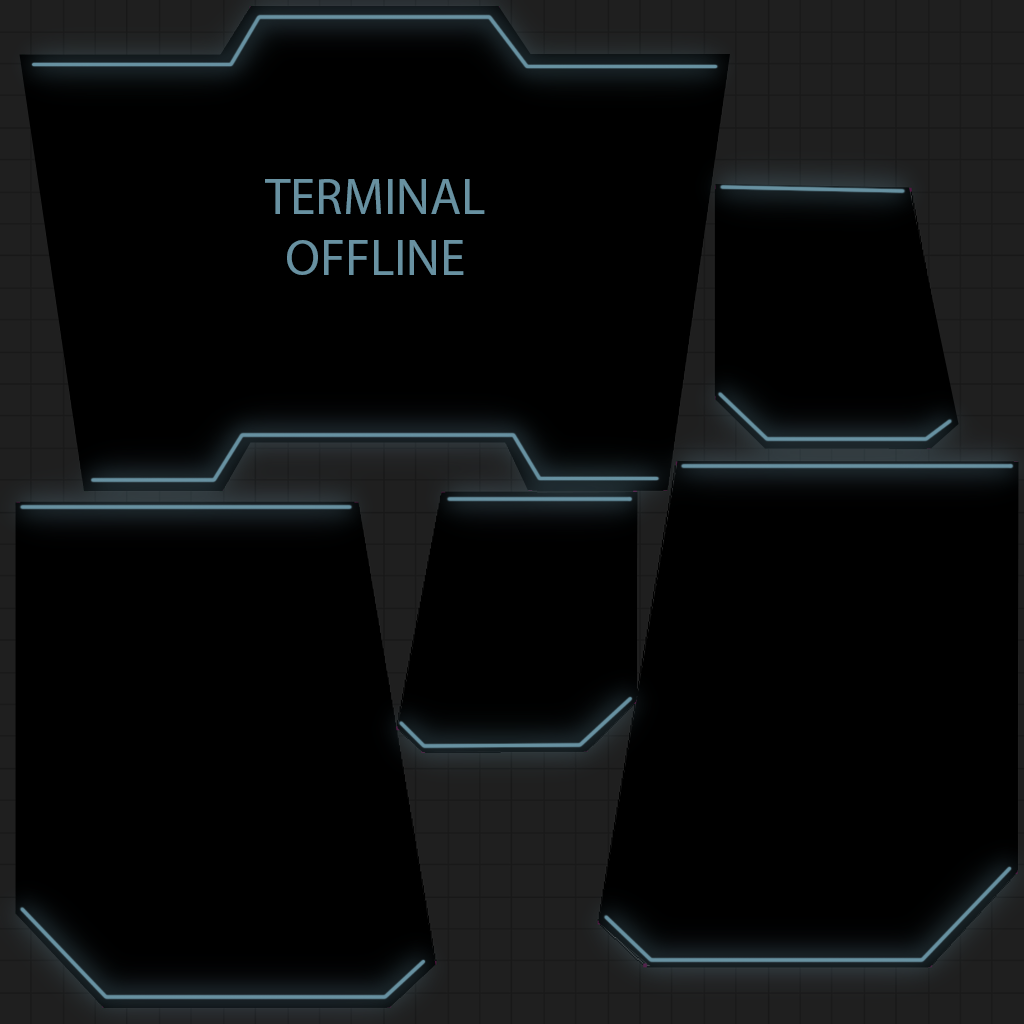
<style>
.page{position:relative;width:1024px;height:1024px;background:#000000}
.page>*{position:absolute;margin:0}
.t1{font:51px "MyriadPro-Regular";color:#6791a1}
</style>
<div class="page">
<p class="t1" style="left:265px;top:179px;width:220px;height:96px;text-align:center">TERMINAL<br>OFFLINE</p>
</div>
